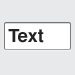
<style>
.page{position:relative;width:75px;height:75px;background:#e8e9ea}
.page>*{position:absolute;margin:0}
.t1{font:18px "Helvetica-Bold";color:#222222}
</style>
<div class="page">
<p class="t1" style="left:8px;top:29px;width:36px;height:14px">Text</p>
</div>
